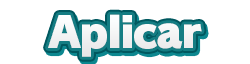
<style>
.page{position:relative;width:250px;height:64px;background:#ffffff}
.page>*{position:absolute;margin:0}
.t1{font:42.7px "RodinPro-UB";letter-spacing:-0.042em;color:#f3f3f4}
</style>
<div class="page">
<p class="t1" style="left:48px;top:14px;width:154px;height:43px">Aplicar</p>
</div>
